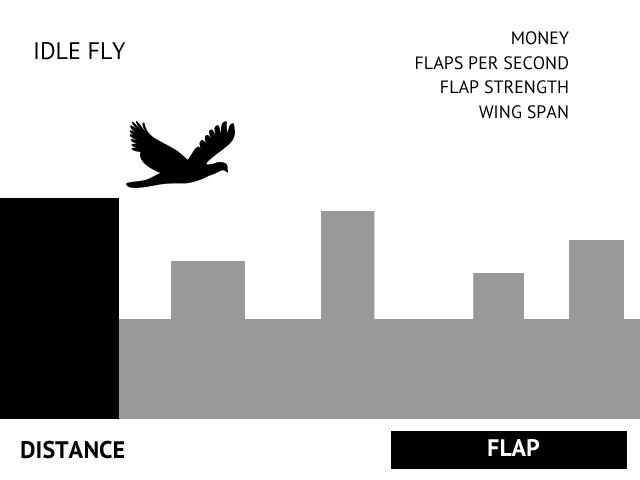
<style>
.page{position:relative;width:640px;height:480px;background:#ffffff}
.page>*{position:absolute;margin:0}
.t1{font:18px "PTSans-Regular";color:#000000;text-transform:uppercase}
.t2{font:24px "PTSans-Regular";color:#000000;text-transform:uppercase}
.t3{font:24px "PTSans-Bold";color:#010101;text-transform:uppercase}
.t4{font:24px "PTSans-Bold";color:#ffffff;text-transform:uppercase}
</style>
<div class="page">
<p class="t1" style="left:512px;top:31px;width:57px;height:14px">Money</p>
<p class="t2" style="left:35px;top:42px;width:91px;height:18px">IdLE FLY</p>
<p class="t1" style="left:416px;top:56px;width:152px;height:14px">Flaps per second</p>
<p class="t1" style="left:441px;top:80px;width:127px;height:14px">Flap strength</p>
<p class="t1" style="left:479px;top:105px;width:89px;height:14px">Wing Span</p>
<p class="t3" style="left:21px;top:440px;width:103px;height:19px">Distance</p>
<p class="t4" style="left:488px;top:439px;width:52px;height:17px">Flap</p>
</div>
